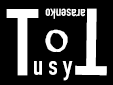
<style>
.page{position:relative;width:113px;height:85px;background:#000000}
.page>*{position:absolute;margin:0}
.t1{font:93px "DINCondensed-Bold";color:#ffffff}
.t2{font:14px "DINCondensed-Bold";color:#ffffff}
.t3{font:39px "Trattatello";color:#ffffff}
.t4{font:27px "DINCondensed-Bold";color:#ffffff}
</style>
<div class="page">
<p class="t1" style="left:6px;top:9px;width:33px;height:67px">T</p>
<p class="t2" style="left:45px;top:8px;width:41px;height:11px;rotate:-180deg">arasenko</p>
<p class="t1" style="left:75px;top:8px;width:32px;height:68px;rotate:-179deg">T</p>
<p class="t3" style="left:45px;top:29px;width:23px;height:23px">O</p>
<p class="t4" style="left:34px;top:61px;width:39px;height:20px">u s y</p>
</div>
